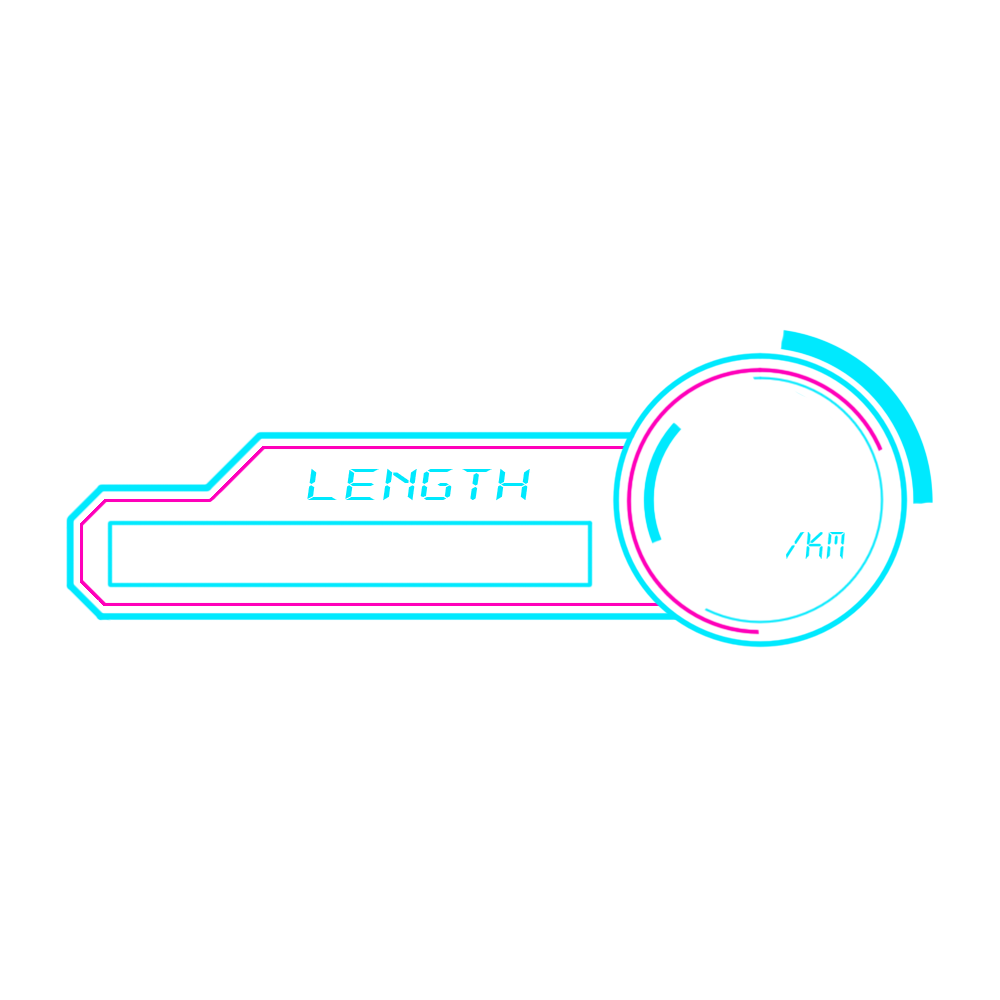
<style>
.page{position:relative;width:1000px;height:1000px;background:#ffffff}
.page>*{position:absolute;margin:0}
.t1{font:48.4px "DS-Digital-Italic";color:#00e9fe;scale:1.59 1}
</style>
<div class="page">
<p class="t1" style="left:307px;top:468px;width:223px;height:33px">Length</p>
</div>
